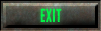
<style>
.page{position:relative;width:101px;height:31px}
.page>*{position:absolute;margin:0}
.t1{font:19px "Sunzoomspark";color:#00f646}
</style>
<div class="page">
<p class="t1" style="left:40px;top:8px;width:22px;height:14px">EXIT</p>
</div>
